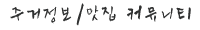
<style>
.page{position:relative;width:200px;height:30px;background:#ffffff}
.page>*{position:absolute;margin:0}
.t1{font:27px "YDSMJ";letter-spacing:-0.075em;color:#303131;scale:0.9 1}
</style>
<div class="page">
<p class="t1" style="left:10px;top:3px;width:181px;height:23px">주거정보/맛집 커뮤니티</p>
</div>
